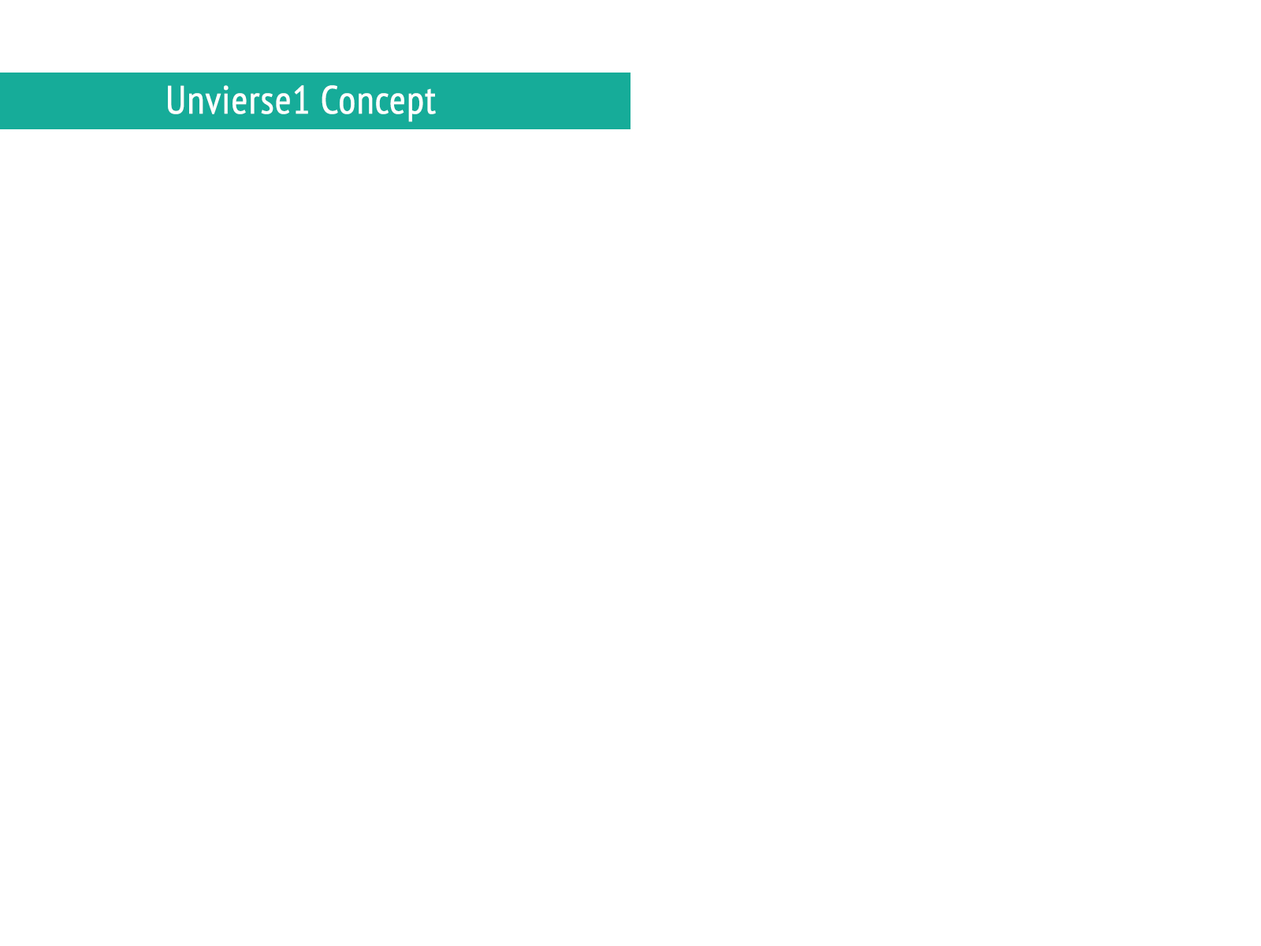
<style>
.page{position:relative;width:1261px;height:946px;background:#ffffff}
.page>*{position:absolute;margin:0}
.t1{font:39.4px "PTSans-Narrow";color:#ffffff;font-weight:bold}
</style>
<div class="page">
<p class="t1" style="left:168px;top:85px;width:268px;height:37px">Unvierse1 Concept</p>
</div>
